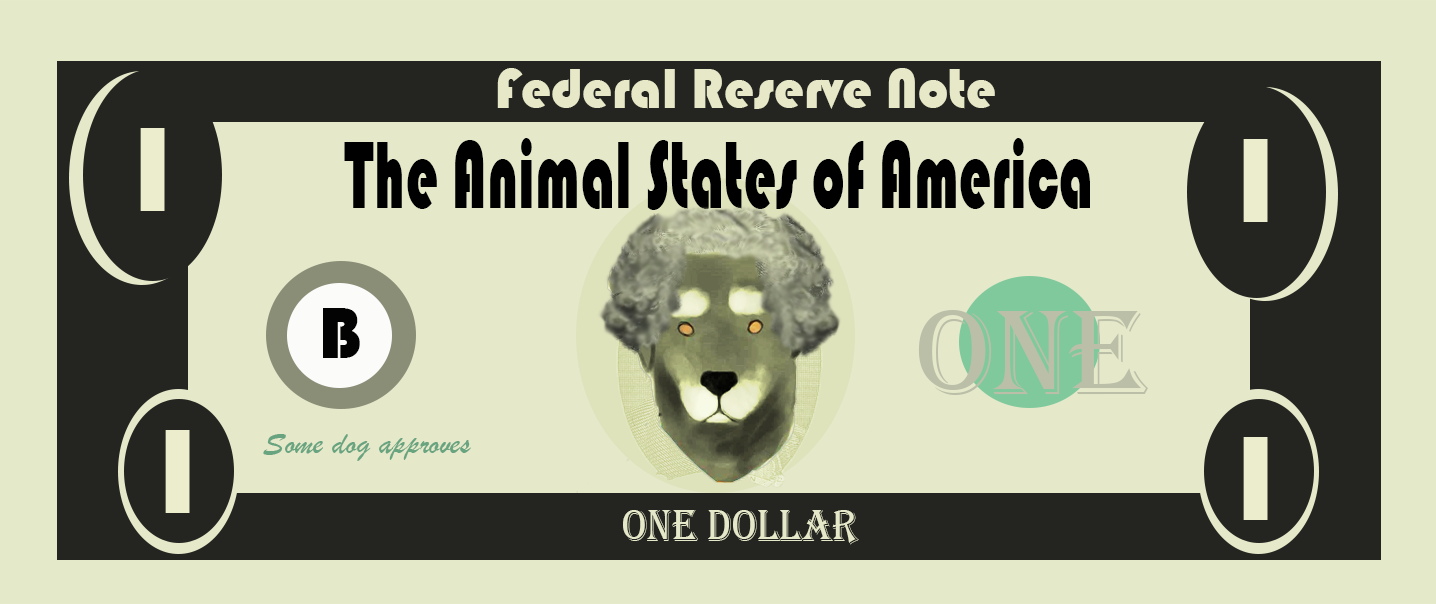
<style>
.page{position:relative;width:1436px;height:604px;background:#242520}
.page>*{position:absolute;margin:0}
.t1{font:57.6px "Bauhaus93";color:#e7e8c8;scale:0.94 1}
.t2{font:125px "Bauhaus93";color:#ecedcd}
.t3{font:98.6px "Bauhaus93";color:#000000;scale:0.59 1}
.t4{font:75px "Bauhaus93";color:#030303}
.t5{font:125px "Algerian";color:#bbbfa8}
.t6{font:33.3px "BrushScriptMT";color:#69a480}
.t7{font:46.9px "Algerian";color:#e5e8c9;scale:0.87 1}
</style>
<div class="page">
<p class="t1" style="left:497px;top:68px;width:498px;height:41px">Federal Reserve Note</p>
<p class="t2" style="left:140px;top:128px;width:25px;height:83px">1</p>
<p class="t3" style="left:344px;top:138px;width:746px;height:72px">The Animal States of America</p>
<p class="t2" style="left:1243px;top:139px;width:25px;height:83px">1</p>
<p class="t4" style="left:323px;top:308px;width:37px;height:50px">B</p>
<p class="t5" style="left:918px;top:310px;width:230px;height:85px">ONE</p>
<p class="t2" style="left:165px;top:430px;width:25px;height:83px">1</p>
<p class="t6" style="left:263px;top:434px;width:208px;height:27px">Some dog approves</p>
<p class="t2" style="left:1243px;top:437px;width:25px;height:83px">1</p>
<p class="t7" style="left:623px;top:510px;width:236px;height:35px">One Dollar</p>
</div>
